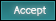
<style>
.page{position:relative;width:56px;height:21px}
.page>*{position:absolute;margin:0}
.t1{font:10px "BadComic";color:#ffffff}
</style>
<div class="page">
<p class="t1" style="left:13px;top:6px;width:33px;height:10px">Accept</p>
</div>
